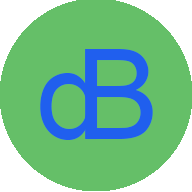
<style>
.page{position:relative;width:192px;height:192px;background:#65bf68}
.page>*{position:absolute;margin:0}
.t1{font:125px "ArialMT";letter-spacing:-0.02em;color:#205fee}
</style>
<div class="page">
<p class="t1" style="left:40px;top:49px;width:57px;height:91px">d</p>
<p class="t1" style="left:85px;top:49px;width:68px;height:90px">B</p>
</div>
